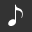
<style>
.page{position:relative;width:32px;height:32px;background:#333333}
.page>*{position:absolute;margin:0}
.t1{font:28.7px "ArialUnicodeMS";letter-spacing:-0.01em;color:#ffffff}
</style>
<div class="page">
<p class="t1" style="left:8px;top:4px;width:15px;height:22px">♪</p>
</div>
